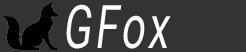
<style>
.page{position:relative;width:246px;height:52px;background:#333333}
.page>*{position:absolute;margin:0}
.t1{font:60px "Roboto-Regular";letter-spacing:0.08em;color:#fbfdfb;font-style:italic;scale:0.7 1}
</style>
<div class="page">
<p class="t1" style="left:66px;top:4px;width:105px;height:45px">GFox</p>
</div>
